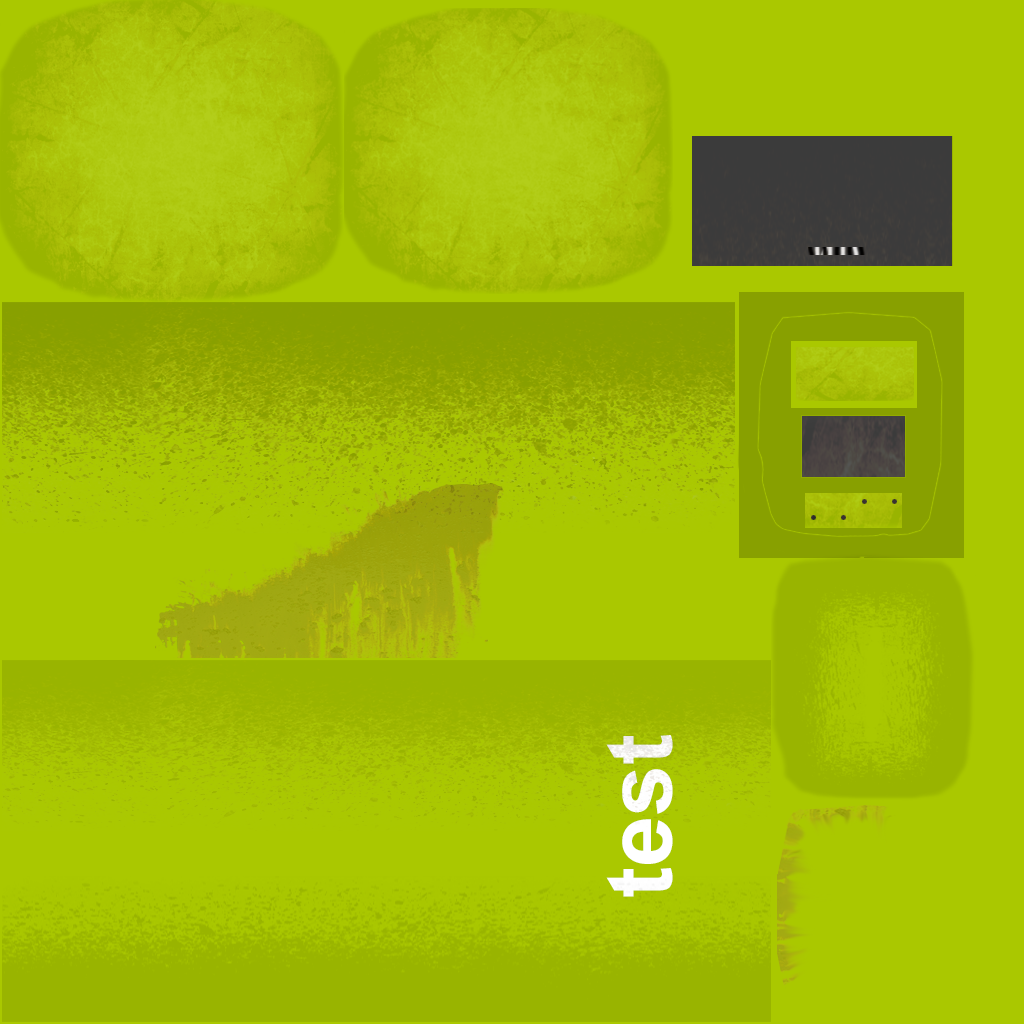
<style>
.page{position:relative;width:1024px;height:1024px;background:#aac800}
.page>*{position:absolute;margin:0}
.t1{font:92.4px "Arial-BoldMT";color:#ffffff}
</style>
<div class="page">
<p class="t1" style="left:606px;top:735px;width:67px;height:162px;rotate:-90deg">test</p>
</div>
